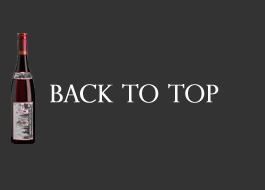
<style>
.page{position:relative;width:265px;height:190px;background:#333333}
.page>*{position:absolute;margin:0}
.t1{font:24px "PerpetuaTitlingMT-Light";color:#fbf8f9;font-weight:bold}
</style>
<div class="page">
<p class="t1" style="left:50px;top:84px;width:169px;height:19px">back to top</p>
</div>
